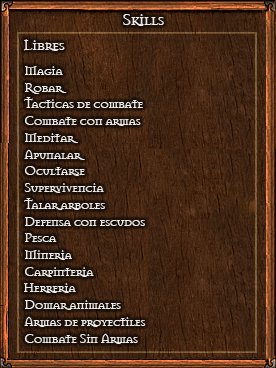
<style>
.page{position:relative;width:276px;height:368px}
.page>*{position:absolute;margin:0}
.t1{font:18px "Mason-Regular";letter-spacing:-0.06em;color:#ececec}
.t2{font:16.5px "Mason-Regular";letter-spacing:-0.06em;color:#ececec}
.t3{font:14px "Mason-Regular";letter-spacing:-0.06em;color:#ececec}
</style>
<div class="page">
<p class="t1" style="left:123px;top:14px;width:41px;height:12px">Skills</p>
<p class="t2" style="left:24px;top:39px;width:41px;height:12px">Libres</p>
<p class="t3" style="left:25px;top:66px;width:38px;height:9px">Magia</p>
<p class="t3" style="left:25px;top:83px;width:42px;height:11px">Robar</p>
<p class="t3" style="left:24px;top:97px;width:119px;height:11px">Tacticas de combate</p>
<p class="t3" style="left:25px;top:116px;width:116px;height:10px">Combate con armas</p>
<p class="t3" style="left:25px;top:133px;width:53px;height:10px">Meditar</p>
<p class="t3" style="left:24px;top:149px;width:61px;height:11px">Apunalar</p>
<p class="t3" style="left:25px;top:166px;width:60px;height:10px">Ocultarse</p>
<p class="t3" style="left:24px;top:183px;width:80px;height:10px">Supervivencia</p>
<p class="t3" style="left:24px;top:198px;width:81px;height:12px">Talar arboles</p>
<p class="t3" style="left:25px;top:217px;width:120px;height:9px">Defensa con escudos</p>
<p class="t3" style="left:25px;top:233px;width:32px;height:9px">Pesca</p>
<p class="t3" style="left:25px;top:250px;width:47px;height:10px">Mineria</p>
<p class="t3" style="left:25px;top:267px;width:69px;height:10px">Carpinteria</p>
<p class="t3" style="left:24px;top:283px;width:52px;height:10px">Herreria</p>
<p class="t3" style="left:25px;top:300px;width:96px;height:10px">Domar animales</p>
<p class="t3" style="left:24px;top:316px;width:122px;height:11px">Armas de proyectiles</p>
<p class="t3" style="left:25px;top:333px;width:113px;height:11px">Combate Sin Armas</p>
</div>
